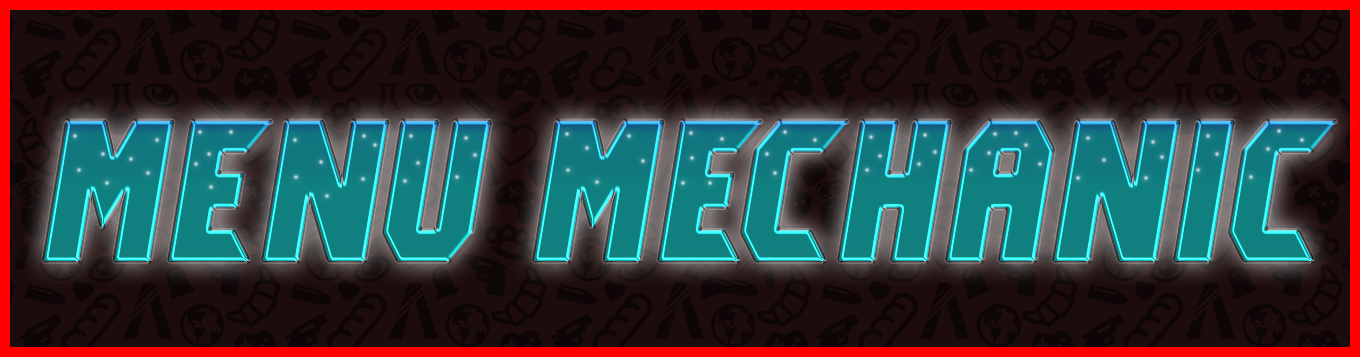
<style>
.page{position:relative;width:1360px;height:357px;background:#1d0c0c}
.page>*{position:absolute;margin:0}
.t1{font:200px "LostAngeles-Italic";color:#107f7f;scale:1.05 1}
</style>
<div class="page">
<p class="t1" style="left:44px;top:121px;width:1293px;height:140px">Menu Mechanic</p>
<p class="t1" style="left:44px;top:121px;width:1293px;height:140px">Menu Mechanic</p>
</div>
